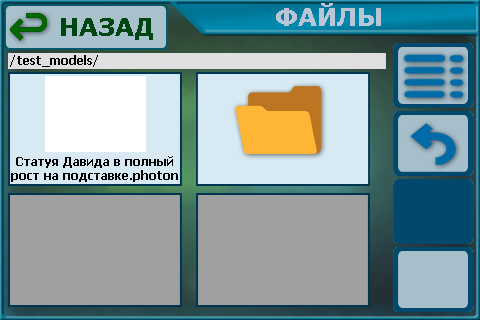
<style>
.page{position:relative;width:480px;height:320px;background:#a0a0a0}
.page>*{position:absolute;margin:0}
.t1{font:24px "Verdana-Bold";color:#bac5d5}
.t2{font:24px "Verdana-Bold";color:#004612}
.t3{font:12px "Tahoma-Bold";color:#000000}
</style>
<div class="page">
<p class="t1" style="left:276px;top:3px;width:105px;height:23px">ФАЙЛЫ</p>
<p class="t2" style="left:61px;top:18px;width:92px;height:22px">НАЗАД</p>
<p class="t3" style="left:10px;top:55px;width:88px;height:12px">/test_models/</p>
<p class="t3" style="left:11px;top:156px;width:167px;height:26px;text-align:center">Статуя Давида в полный<br>рост на подставке.photon</p>
</div>
